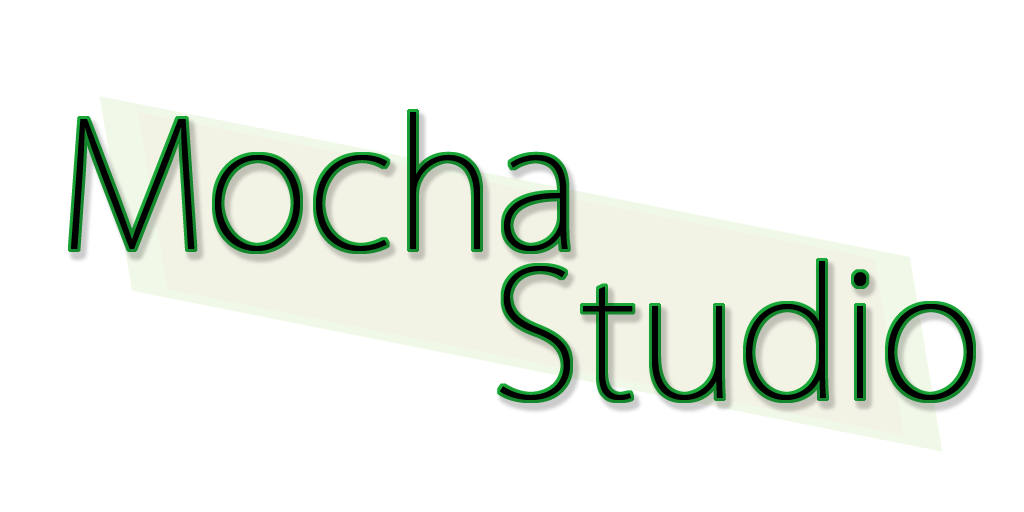
<style>
.page{position:relative;width:1024px;height:512px;background:#ffffff}
.page>*{position:absolute;margin:0}
.t1{font:172px "KozGoPro-ExtraLight";color:#000000}
</style>
<div class="page">
<p class="t1" style="left:71px;top:112px;width:497px;height:139px">Mocha</p>
<p class="t1" style="left:499px;top:261px;width:474px;height:139px">Studio</p>
</div>
